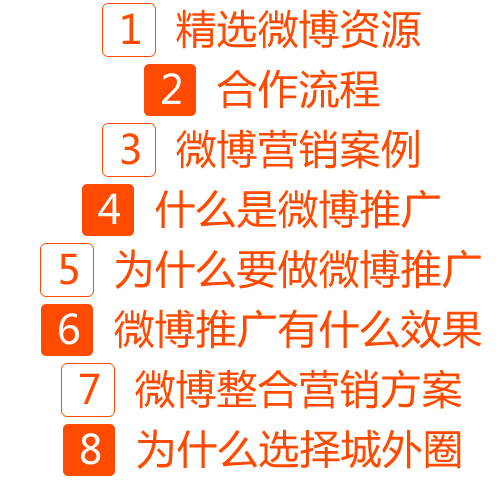
<style>
.page{position:relative;width:500px;height:480px;background:#ffffff}
.page>*{position:absolute;margin:0}
.t1{font:40px "MicrosoftYaHei";letter-spacing:0.025em;color:#ff4a00}
.t2{font:40px "MicrosoftYaHei";letter-spacing:0.025em;color:#ffffff}
</style>
<div class="page">
<p class="t1" style="left:122px;top:13px;width:18px;height:31px">1</p>
<p class="t1" style="left:176px;top:9px;width:245px;height:40px">精选微博资源</p>
<p class="t2" style="left:162px;top:73px;width:19px;height:31px">2</p>
<p class="t1" style="left:217px;top:69px;width:163px;height:40px">合作流程</p>
<p class="t1" style="left:121px;top:133px;width:19px;height:32px">3</p>
<p class="t1" style="left:176px;top:129px;width:243px;height:40px">微博营销案例</p>
<p class="t2" style="left:98px;top:193px;width:22px;height:31px">4</p>
<p class="t1" style="left:155px;top:189px;width:285px;height:40px">什么是微博推广</p>
<p class="t1" style="left:60px;top:253px;width:18px;height:32px">5</p>
<p class="t1" style="left:115px;top:249px;width:366px;height:40px">为什么要做微博推广</p>
<p class="t2" style="left:59px;top:313px;width:20px;height:32px">6</p>
<p class="t1" style="left:114px;top:309px;width:368px;height:40px">微博推广有什么效果</p>
<p class="t1" style="left:80px;top:373px;width:20px;height:31px">7</p>
<p class="t1" style="left:135px;top:369px;width:327px;height:40px">微博整合营销方案</p>
<p class="t2" style="left:81px;top:433px;width:20px;height:32px">8</p>
<p class="t1" style="left:137px;top:429px;width:324px;height:40px">为什么选择城外圈</p>
</div>
